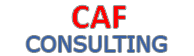
<style>
.page{position:relative;width:194px;height:56px;background:#ffffff}
.page>*{position:absolute;margin:0}
.t1{font:21.3px "Verdana";color:#365fa5}
</style>
<div class="page">
<p class="t1" style="left:26px;top:36px;width:141px;height:16px">CONSULTING</p>
</div>
